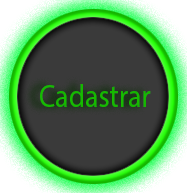
<style>
.page{position:relative;width:187px;height:193px;background:#3a3a3a}
.page>*{position:absolute;margin:0}
.t1{font:32px "MyriadPro-Regular";color:#16bc00;scale:0.89 1}
</style>
<div class="page">
<p class="t1" style="left:40px;top:84px;width:111px;height:23px">Cadastrar</p>
</div>
